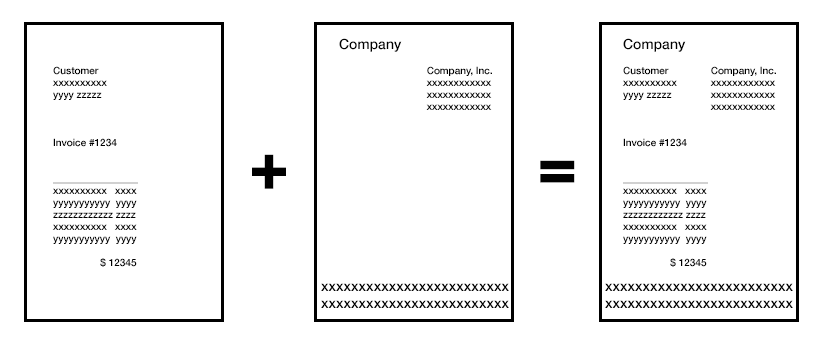
<style>
.page{position:relative;width:827px;height:347px;background:#ffffff}
.page>*{position:absolute;margin:0}
.t1{font:14px "HelveticaNeue-Medium";color:#000000}
.t2{font:10px "HelveticaNeue-Medium";color:#000000}
.t3{font:72px "Impact";color:#000000}
</style>
<div class="page">
<p class="t1" style="left:339px;top:38px;width:63px;height:14px">Company</p>
<p class="t1" style="left:623px;top:38px;width:63px;height:14px">Company</p>
<p class="t2" style="left:52px;top:66px;width:86px;height:201px">Customer<br>xxxxxxxxxx<br>yyyy zzzzz<br><br><br><br>Invoice #1234<br><br><br>_________________<br>xxxxxxxxxx   xxxx<br>yyyyyyyyyyy  yyyy<br>zzzzzzzzzzzz zzzz<br>xxxxxxxxxx   xxxx<br>yyyyyyyyyyy  yyyy<br><br>                 $ 12345</p>
<p class="t2" style="left:426px;top:66px;width:66px;height:44px">Company, Inc.<br>xxxxxxxxxxxx<br>xxxxxxxxxxxx<br>xxxxxxxxxxxx</p>
<p class="t2" style="left:622px;top:66px;width:86px;height:201px">Customer<br>xxxxxxxxxx<br>yyyy zzzzz<br><br><br><br>Invoice #1234<br><br><br>_________________<br>xxxxxxxxxx   xxxx<br>yyyyyyyyyyy  yyyy<br>zzzzzzzzzzzz zzzz<br>xxxxxxxxxx   xxxx<br>yyyyyyyyyyy  yyyy<br><br>                 $ 12345</p>
<p class="t2" style="left:710px;top:66px;width:66px;height:44px">Company, Inc.<br>xxxxxxxxxxxx<br>xxxxxxxxxxxx<br>xxxxxxxxxxxx</p>
<p class="t3" style="left:252px;top:154px;width:34px;height:35px">+</p>
<p class="t3" style="left:540px;top:160px;width:35px;height:23px">=</p>
<p class="t1" style="left:321px;top:283px;width:188px;height:25px">xxxxxxxxxxxxxxxxxxxxxxxxx<br>xxxxxxxxxxxxxxxxxxxxxxxxx</p>
<p class="t1" style="left:605px;top:283px;width:188px;height:25px">xxxxxxxxxxxxxxxxxxxxxxxxx<br>xxxxxxxxxxxxxxxxxxxxxxxxx</p>
</div>
